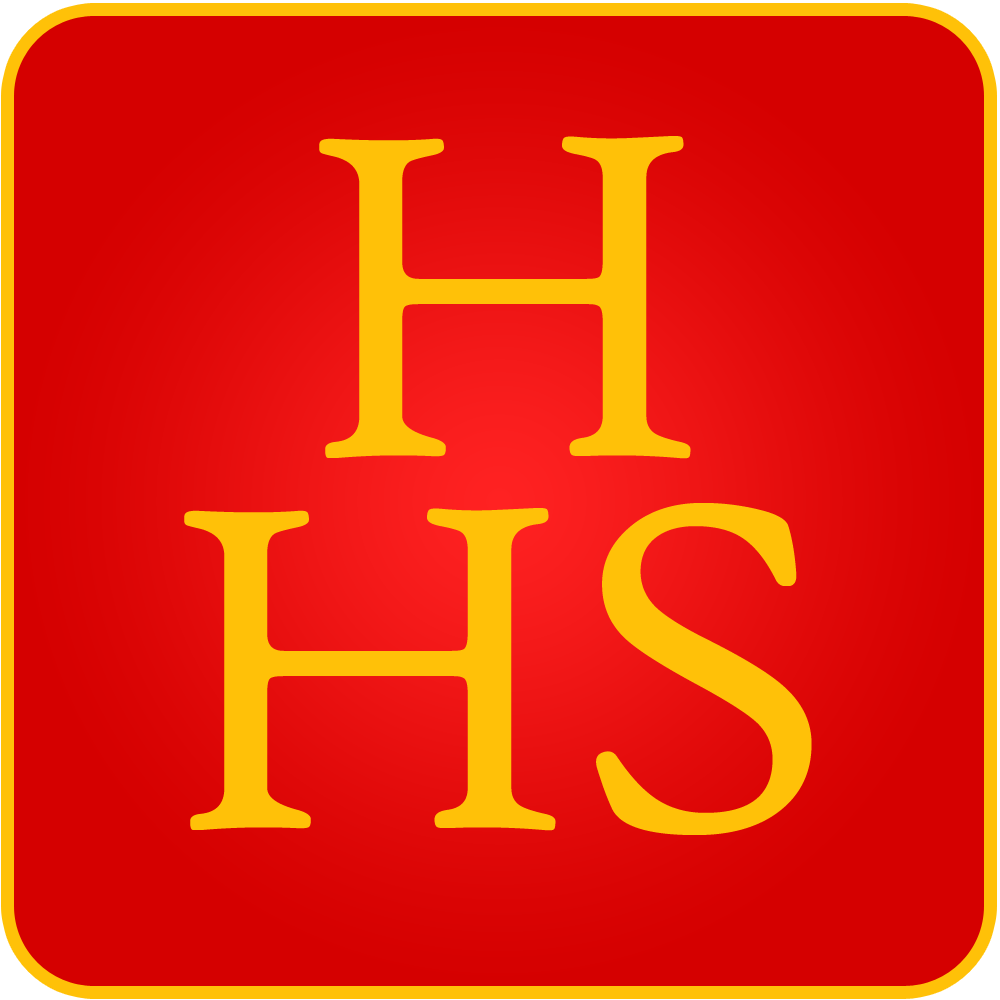
<style>
.page{position:relative;width:1000px;height:1000px;background:#d50000}
.page>*{position:absolute;margin:0}
.t1{font:495.6px/372px "HighTowerText-Reg";color:#ffc108}
</style>
<div class="page">
<p class="t1" style="left:184px;top:136px;width:628px;height:699px;text-align:center">H<br>HS</p>
</div>
